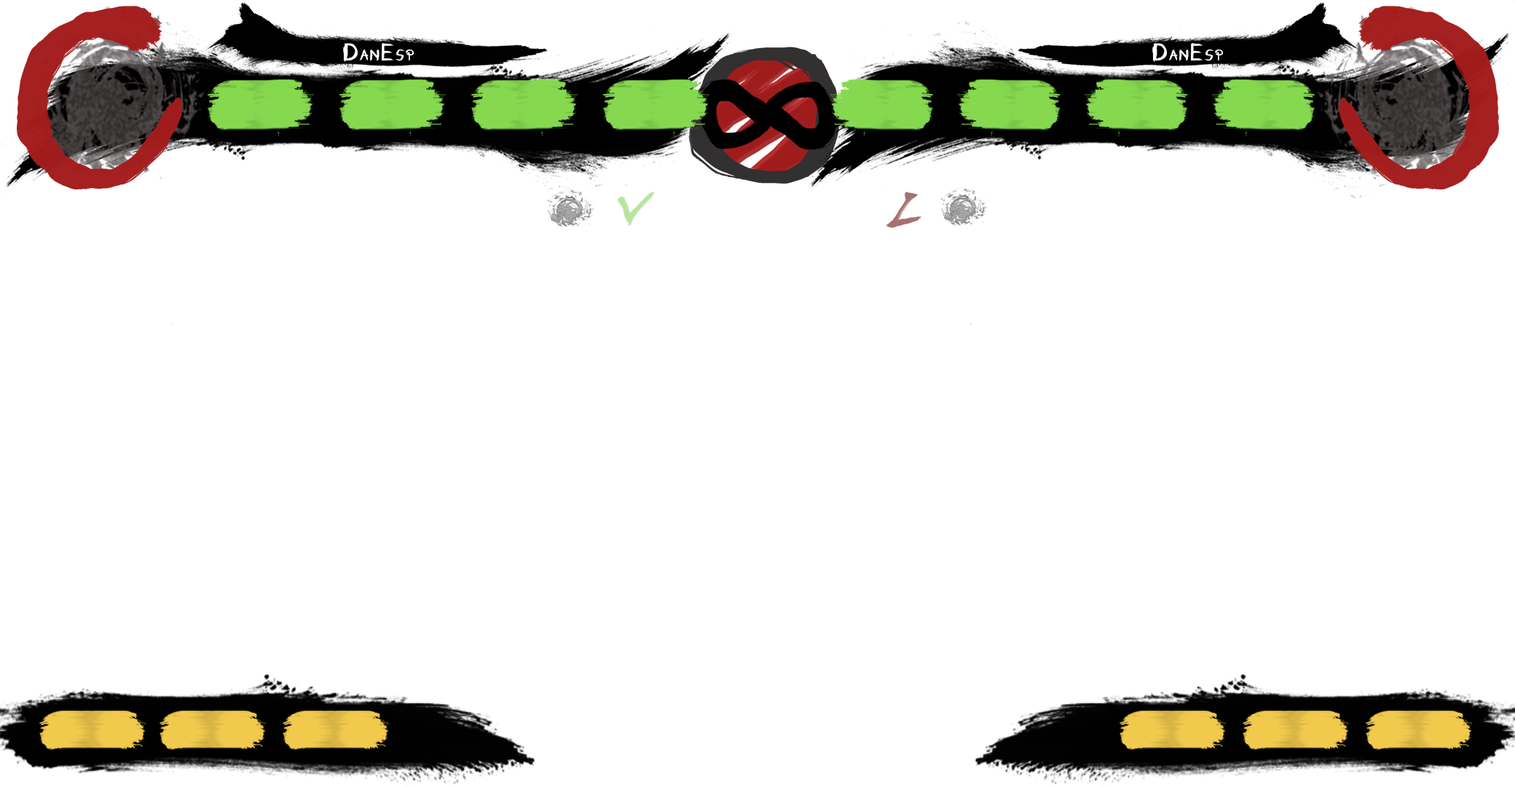
<style>
.page{position:relative;width:1515px;height:787px;background:#ffffff}
.page>*{position:absolute;margin:0}
.t1{font:16px "FontbrushByDanesp21-Regular";color:#ffffff;scale:1.1 1}
.t2{font:26.6px "FontbrushByDanesp21-Regular";color:#ffffff;scale:1.1 1}
</style>
<div class="page">
<p class="t1" style="left:343px;top:43px;width:72px;height:19px"><span class="t2">D</span>AN<span class="t2">E</span>SP</p>
<p class="t1" style="left:1153px;top:43px;width:71px;height:19px"><span class="t2">D</span>AN<span class="t2">E</span>SP</p>
</div>
